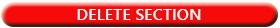
<style>
.page{position:relative;width:280px;height:28px;background:#f60b0b}
.page>*{position:absolute;margin:0}
.t1{font:16.4px "YuGothicUI-Bold";color:#ffffff}
</style>
<div class="page">
<p class="t1" style="left:77px;top:9px;width:124px;height:11px">DELETE SECTION</p>
</div>
